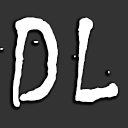
<style>
.page{position:relative;width:128px;height:128px;background:#333333}
.page>*{position:absolute;margin:0}
.t1{font:146.8px "Chiller-Regular";color:#ffffff}
.t2{font:116.2px "Chiller-Regular";color:#ffffff}
</style>
<div class="page">
<p class="t1" style="left:0px;top:17px;width:58px;height:90px">D</p>
<p class="t2" style="left:74px;top:17px;width:44px;height:85px">L</p>
</div>
